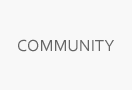
<style>
.page{position:relative;width:132px;height:90px;background:#f8f8f8}
.page>*{position:absolute;margin:0}
.t1{font:17px "Corbel";color:#666666}
</style>
<div class="page">
<p class="t1" style="left:18px;top:39px;width:96px;height:13px">COMMUNITY</p>
</div>
